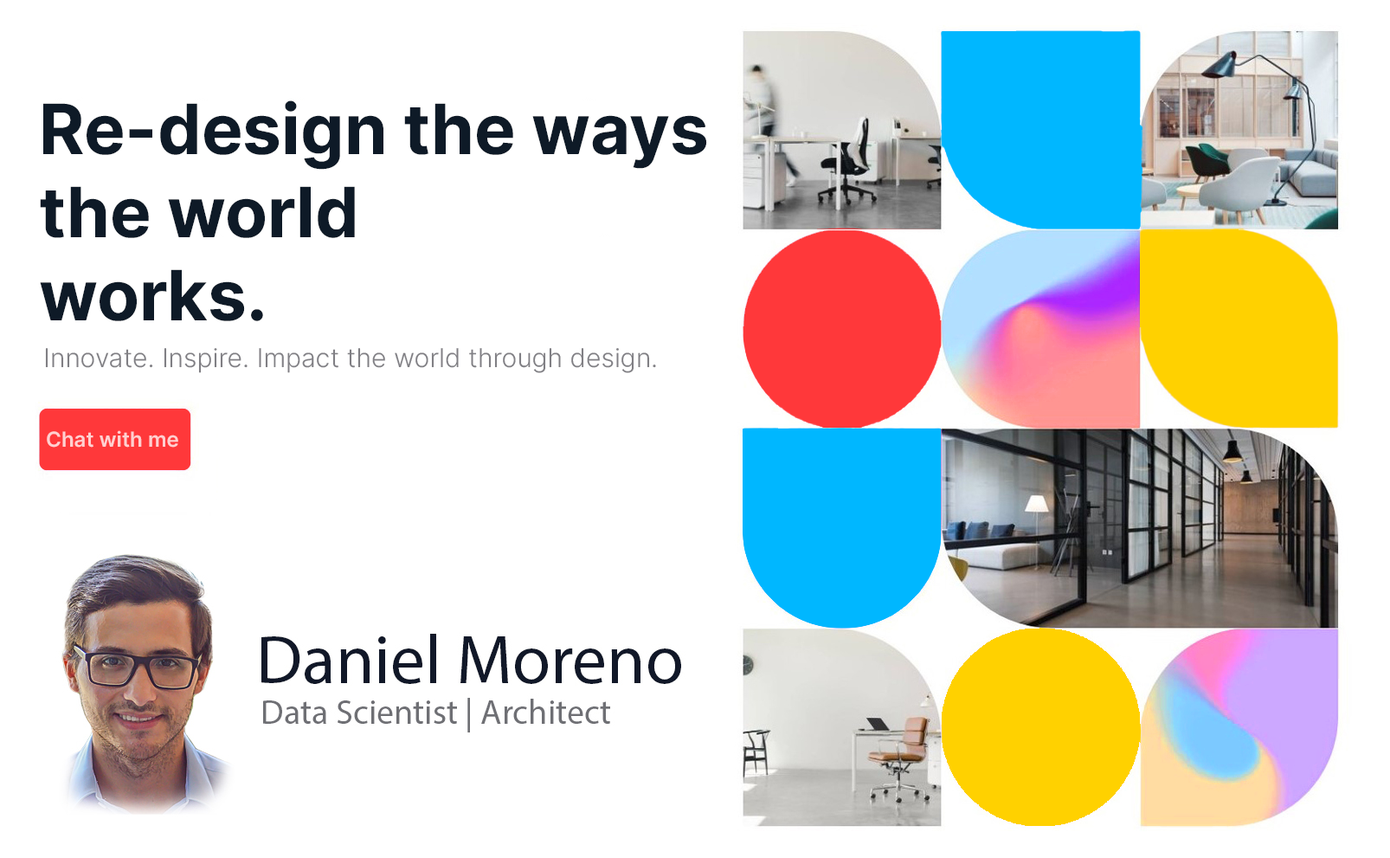
<style>
.page{position:relative;width:1390px;height:858px;background:#ffffff}
.page>*{position:absolute;margin:0}
.t1{font:69.2px "Inter-Bold";color:#0e1a27}
.t2{font:26px "Inter-Light";color:#807f84}
.t3{font:20.8px "Inter-SemiBold";color:#ffd0d0}
</style>
<div class="page">
<p class="t1" style="left:40px;top:100px;width:667px;height:221px">Re-design the ways <br>the world <br>works.</p>
<p class="t2" style="left:45px;top:348px;width:611px;height:25px">Innovate. Inspire. Impact the world through design.</p>
<p class="t3" style="left:47px;top:430px;width:131px;height:18px">Chat with me</p>
</div>
